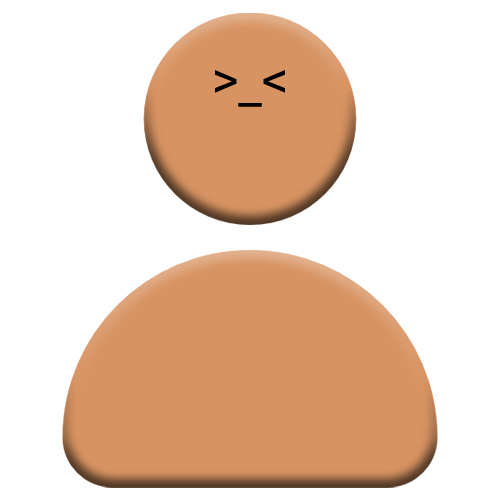
<style>
.page{position:relative;width:500px;height:500px;background:#ffffff}
.page>*{position:absolute;margin:0}
.t1{font:46.7px "Aspekta-450";color:#000000}
</style>
<div class="page">
<p class="t1" style="left:215px;top:70px;width:70px;height:37px">&gt;_&lt;</p>
</div>
